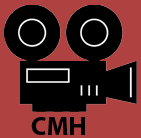
<style>
.page{position:relative;width:141px;height:138px;background:#000000}
.page>*{position:absolute;margin:0}
.t1{font:26px "MyriadPro-Bold";color:#000000}
</style>
<div class="page">
<p class="t1" style="left:31px;top:117px;width:54px;height:18px">CMH</p>
</div>
